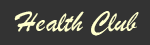
<style>
.page{position:relative;width:150px;height:45px;background:#333333}
.page>*{position:absolute;margin:0}
.t1{font:30px "STXingkai";color:#ffffcc}
</style>
<div class="page">
<p class="t1" style="left:14px;top:11px;width:125px;height:25px">Health Club</p>
</div>
